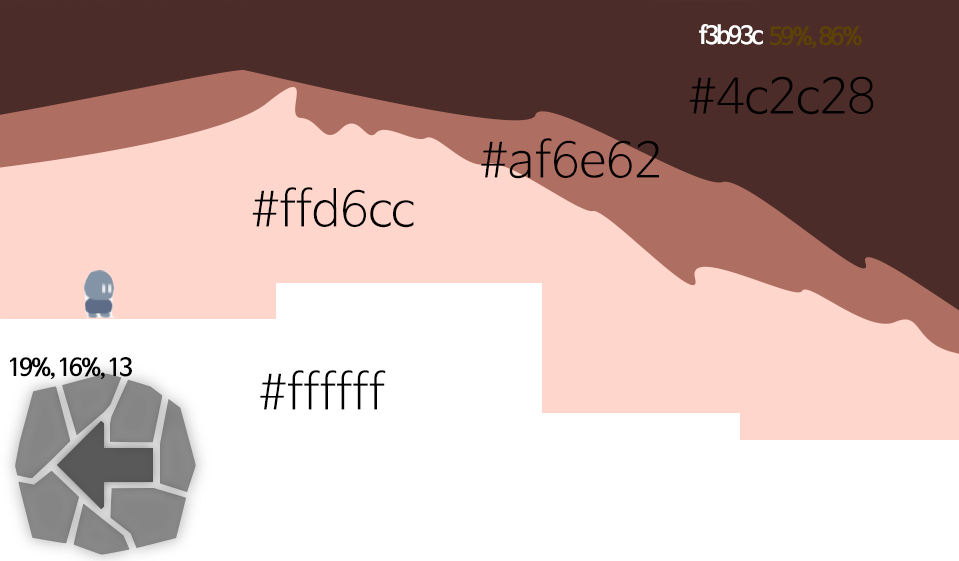
<style>
.page{position:relative;width:959px;height:561px;background:#ffffff}
.page>*{position:absolute;margin:0}
.t1{font:24px "NanumBarunGothicBold";letter-spacing:-0.1em;color:#ffffff}
.t2{font:24px "NanumBarunGothicBold";letter-spacing:-0.1em;color:#5d4206}
.t3{font:48px "NanumBarunGothicLight";color:#000000}
.t4{font:24px "NanumBarunGothicBold";letter-spacing:-0.1em;color:#000000}
</style>
<div class="page">
<p class="t1" style="left:699px;top:24px;width:64px;height:21px">f3b93c</p>
<p class="t2" style="left:770px;top:26px;width:92px;height:23px">59%, 86%</p>
<p class="t3" style="left:689px;top:76px;width:185px;height:39px">#4c2c28</p>
<p class="t3" style="left:481px;top:138px;width:178px;height:41px">#af6e62</p>
<p class="t3" style="left:252px;top:187px;width:162px;height:41px">#ffd6cc</p>
<p class="t4" style="left:10px;top:357px;width:122px;height:23px">19%, 16%, 13</p>
<p class="t3" style="left:260px;top:370px;width:126px;height:40px">#ffffff</p>
</div>
